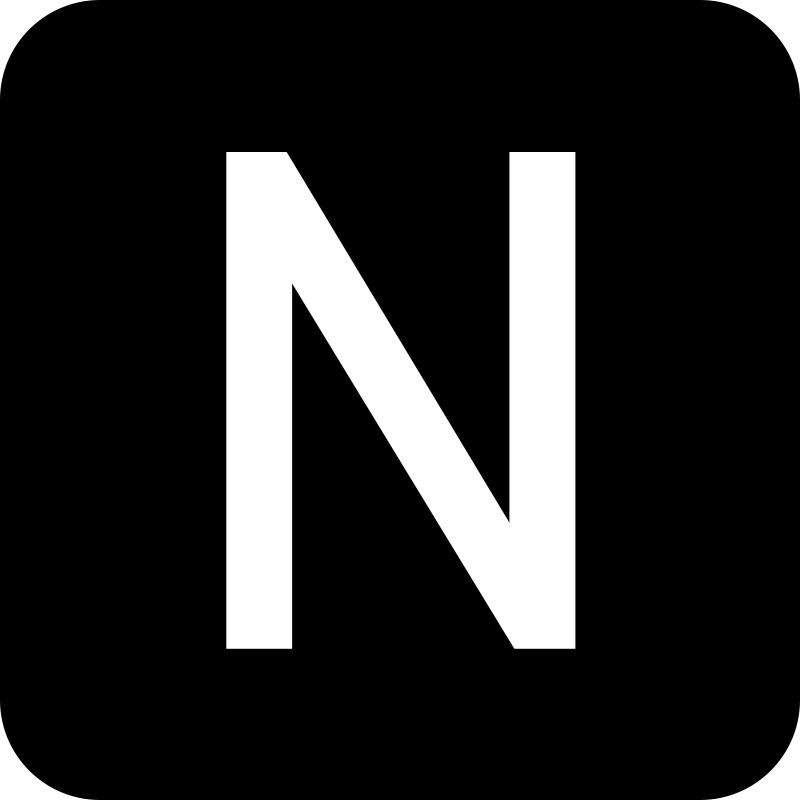
<style>
.page{position:relative;width:800px;height:800px;background:#000000}
.page>*{position:absolute;margin:0}
.t1{font:700px "Bahnschrift";letter-spacing:0.13em;color:#ffffff;scale:0.95 1}
</style>
<div class="page">
<p class="t1" style="left:226px;top:152px;width:350px;height:497px">N</p>
</div>
